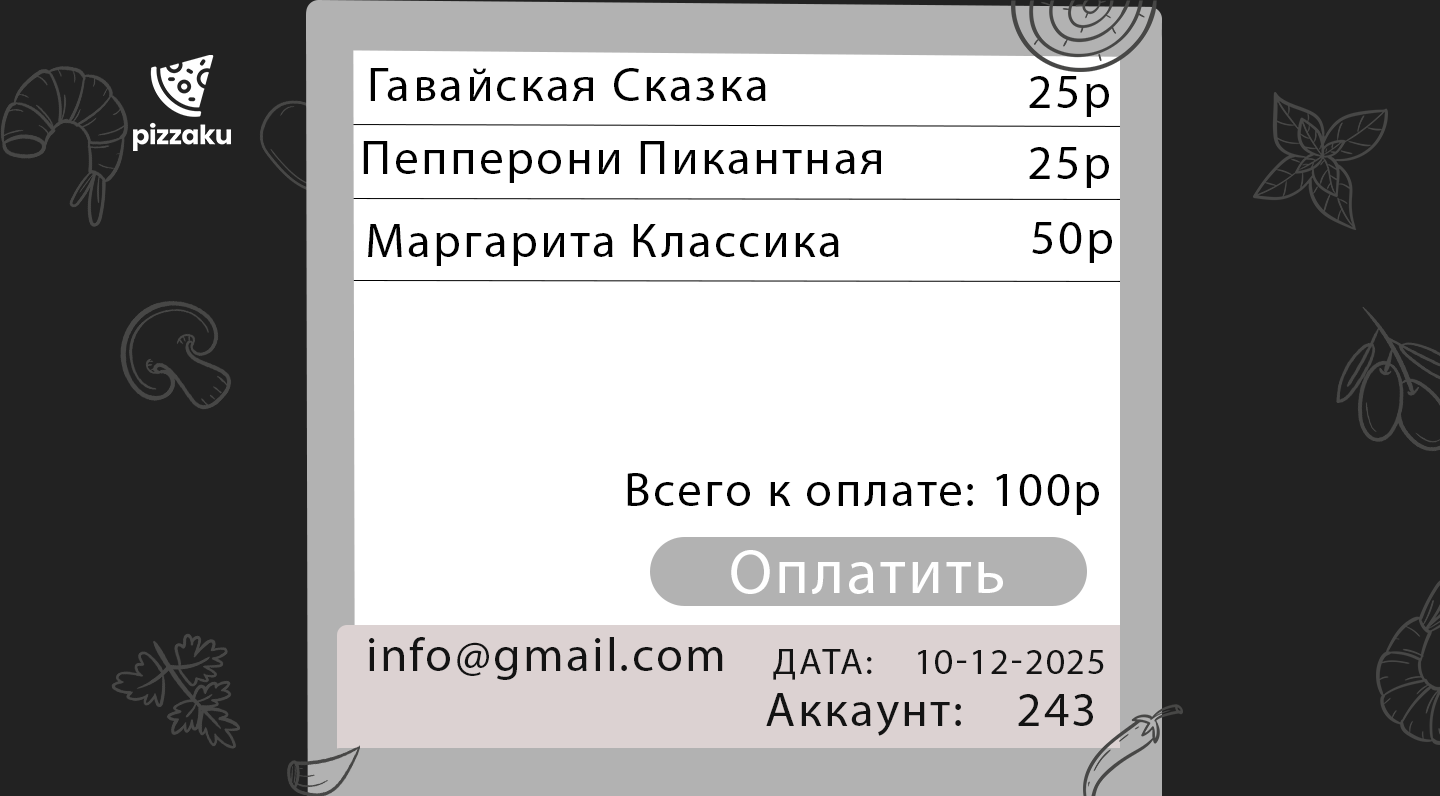
<style>
.page{position:relative;width:1440px;height:796px;background:#222222}
.page>*{position:absolute;margin:0}
.t1{font:47.7px "MyriadPro-Regular";letter-spacing:0.05em;color:#000000}
.t2{font:62.5px "MyriadPro-Regular";letter-spacing:0.05em;color:#ffffff}
.t3{font:47.7px "MyriadPro-Regular";letter-spacing:0.05em;color:#131313}
.t4{font:36.1px "MyriadPro-Regular";letter-spacing:0.05em;color:#131313;text-transform:uppercase}
</style>
<div class="page">
<p class="t1" style="left:370px;top:68px;width:396px;height:33px">Гавайская Сказка</p>
<p class="t1" style="left:1029px;top:76px;width:80px;height:41px">25р</p>
<p class="t1" style="left:363px;top:141px;width:518px;height:42px">Пепперони Пикантная</p>
<p class="t1" style="left:1029px;top:147px;width:80px;height:41px">25р</p>
<p class="t1" style="left:1032px;top:222px;width:80px;height:41px">50р</p>
<p class="t1" style="left:368px;top:224px;width:471px;height:42px">Маргарита Классика</p>
<p class="t1" style="left:627px;top:473px;width:472px;height:42px">Всего к оплате: 100р</p>
<p class="t2" style="left:731px;top:550px;width:272px;height:44px">Оплатить</p>
<p class="t3" style="left:369px;top:637px;width:354px;height:43px">info@gmail.com</p>
<p class="t4" style="left:773px;top:649px;width:331px;height:31px">ДАТА:    10-12-2025</p>
<p class="t3" style="left:766px;top:693px;width:327px;height:43px">Аккаунт:    243 987</p>
</div>
